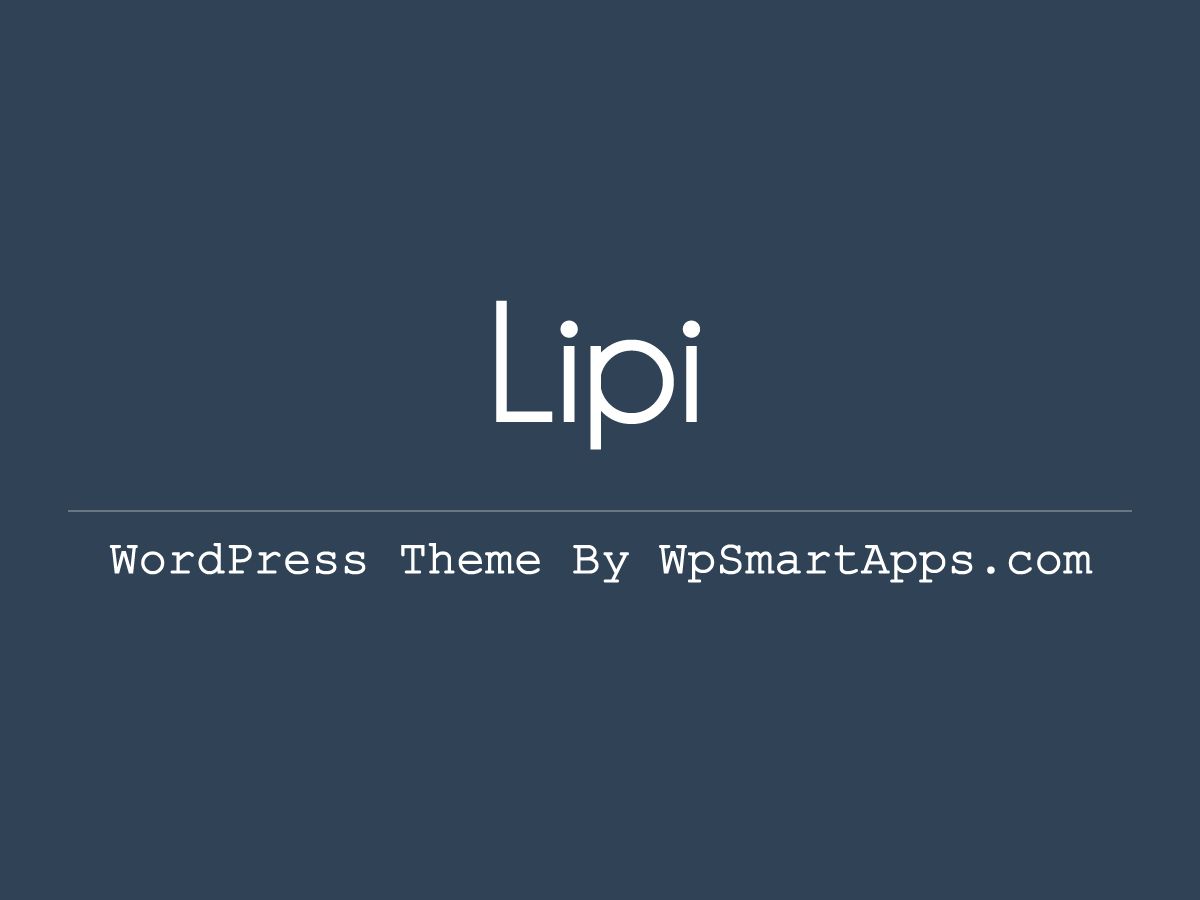
<style>
.page{position:relative;width:1200px;height:900px;background:#304255}
.page>*{position:absolute;margin:0}
.t1{font:150px "CaviarDreams-Italic";letter-spacing:-0.05em;color:#ffffff;font-weight:bold}
.t2{font:48px "SimplifiedArabicFixed";letter-spacing:-0.025em;color:#ffffff;font-weight:bold}
</style>
<div class="page">
<p class="t1" style="left:496px;top:300px;width:204px;height:150px">Lipi</p>
<p class="t2" style="left:109px;top:543px;width:984px;height:40px">WordPress Theme By WpSmartApps.com</p>
</div>
